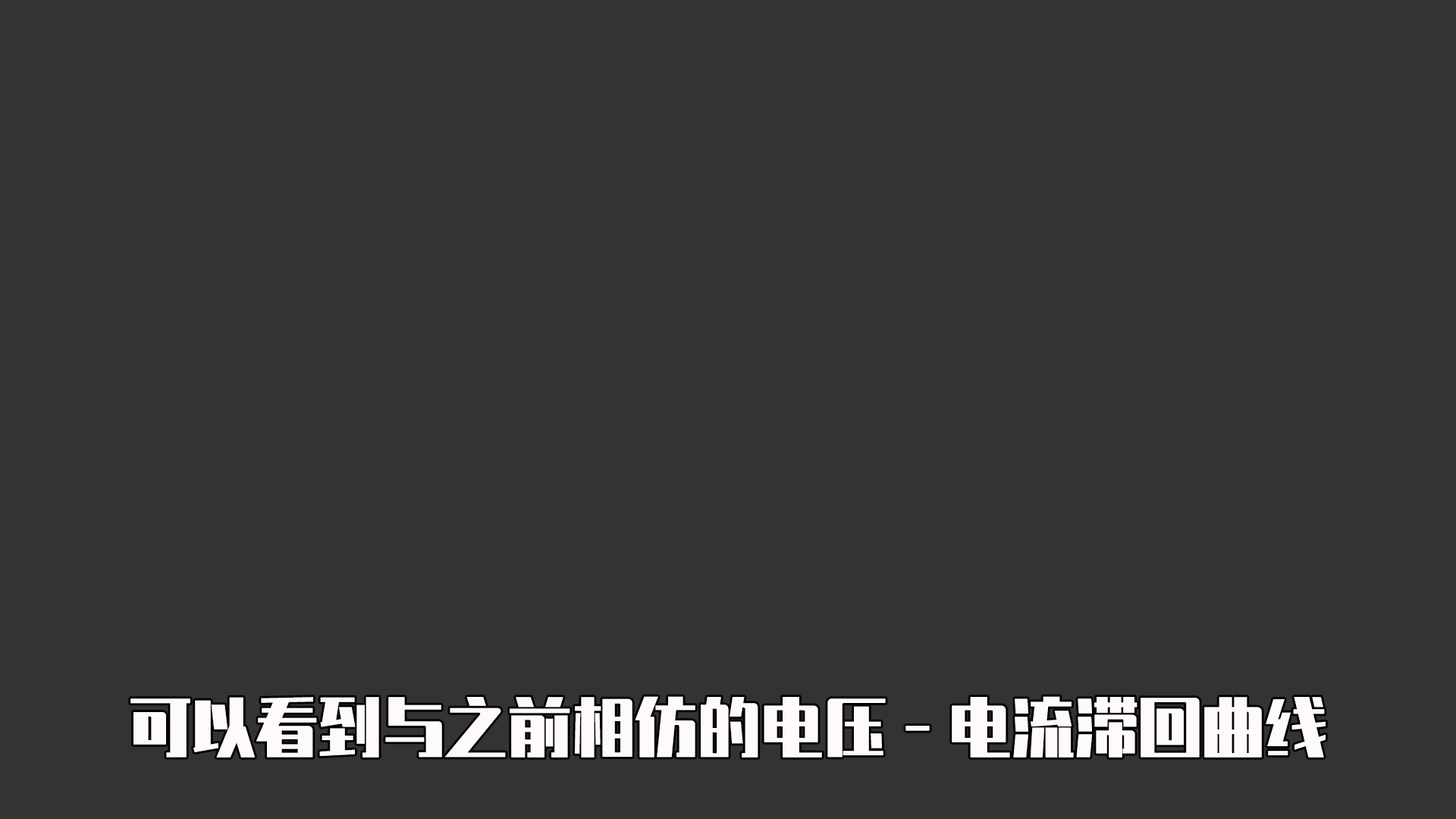
<style>
.page{position:relative;width:1456px;height:819px;background:#333333}
.page>*{position:absolute;margin:0}
.t1{font:63.2px "ZhenyanGB-Regular";color:#fefafa}
</style>
<div class="page">
<p class="t1" style="left:130px;top:696px;width:1196px;height:62px">可以看到与之前相仿的电压-电流滞回曲线</p>
</div>
